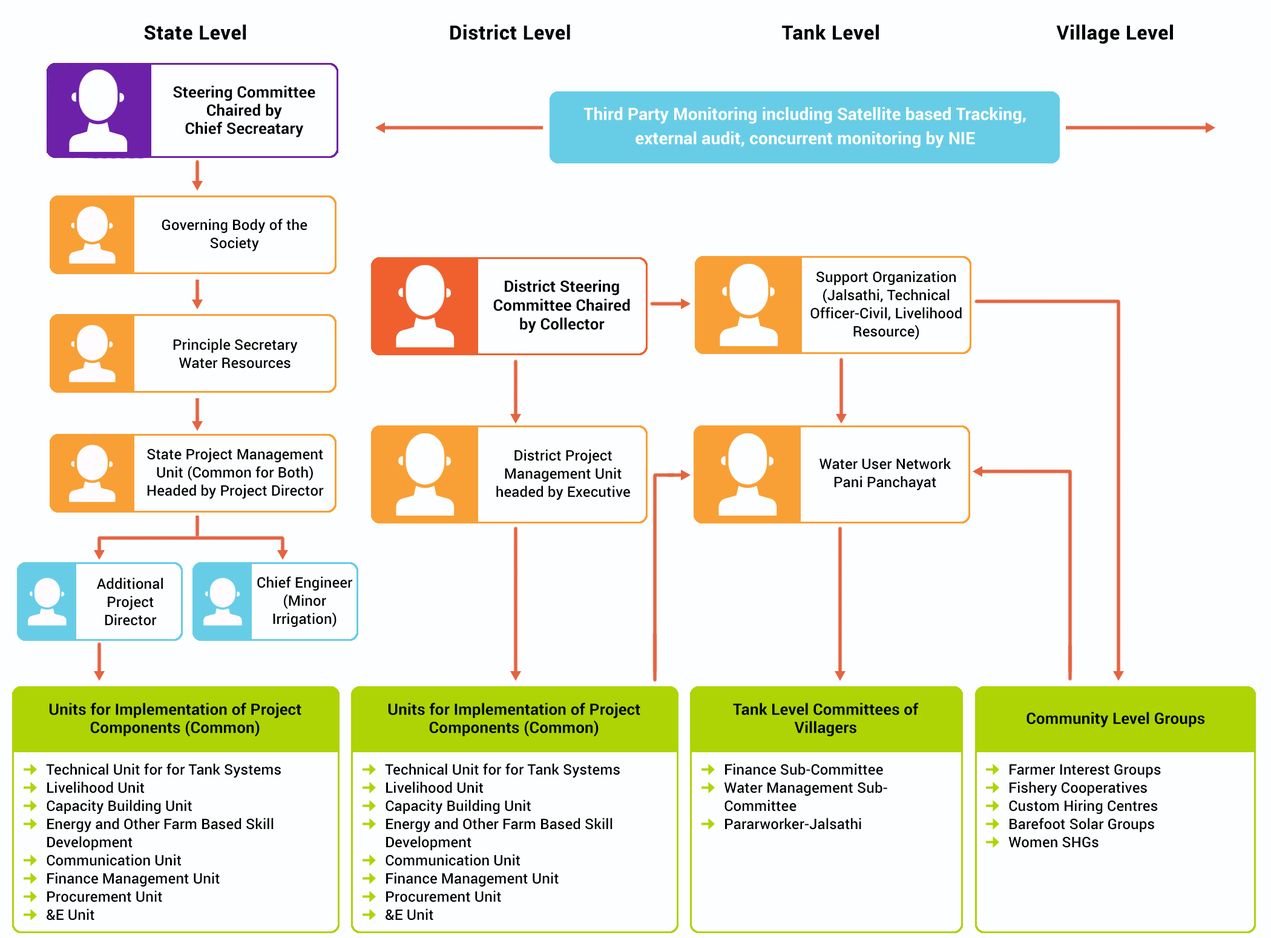
<style>
.page{position:relative;width:1271px;height:938px;background:#fdfeff}
.page>*{position:absolute;margin:0}
.t1{font:19.4px "Roboto-Bold";letter-spacing:0.005em;color:#000000;font-weight:bold}
.t2{font:15.7px/18.2px "Roboto-Bold";letter-spacing:0.005em;color:#000000}
.t3{font:16.9px/24.2px "Roboto-Bold";letter-spacing:0.005em;color:#ffffff}
.t4{font:14.5px/18.2px "Roboto-Medium";letter-spacing:0.005em;color:#000000}
.t5{font:15.7px "Roboto-Bold";letter-spacing:0.005em;color:#000000}
</style>
<div class="page">
<p class="t1" style="left:144px;top:24px;width:102px;height:16px">State Level</p>
<p class="t1" style="left:450px;top:24px;width:120px;height:16px">District Level</p>
<p class="t1" style="left:782px;top:24px;width:97px;height:16px">Tank Level</p>
<p class="t1" style="left:1056px;top:24px;width:117px;height:20px">Village Level</p>
<p class="t2" style="left:173px;top:85px;width:142px;height:52px;text-align:center">Steering Committee<br>Chaired by<br>Chief Secreatary</p>
<p class="t3" style="left:583px;top:107px;width:443px;height:41px;text-align:center">Third Party Monitoring including Satellite based Tracking,<br>external audit, concurrent monitoring by NIE</p>
<p class="t4" style="left:162px;top:218px;width:145px;height:33px;text-align:center">Governing Body of the<br>Society</p>
<p class="t5" style="left:493px;top:280px;width:137px;height:53px;text-align:center">District Steering<br>Committee Chaired<br>by Collector</p>
<p class="t4" style="left:810px;top:271px;width:152px;height:69px;text-align:center">Support Organization<br>(Jalsathi, Technical<br>Officer-Civil, Livelihood<br>Resource)</p>
<p class="t4" style="left:173px;top:338px;width:125px;height:31px;text-align:center">Principle Secretary<br>Water Resources</p>
<p class="t4" style="left:147px;top:448px;width:177px;height:51px;text-align:center">State Project Management<br>Unit (Common for Both)<br>Headed by Project Director</p>
<p class="t4" style="left:496px;top:449px;width:134px;height:51px;text-align:center">District Project<br>Management Unit<br>headed by Executive</p>
<p class="t4" style="left:820px;top:458px;width:131px;height:32px;text-align:center">Water User Network<br>Pani Panchayat</p>
<p class="t4" style="left:97px;top:577px;width:66px;height:49px;text-align:center">Additional<br>Project<br>Director</p>
<p class="t4" style="left:257px;top:576px;width:96px;height:52px;text-align:center">Chief Engineer<br>(Minor<br>Irrigation)</p>
<p class="t2" style="left:49px;top:703px;width:252px;height:34px;text-align:center">Units for Implementation of Project<br>Components (Common)</p>
<p class="t2" style="left:388px;top:703px;width:252px;height:34px;text-align:center">Units for Implementation of Project<br>Components (Common)</p>
<p class="t2" style="left:733px;top:703px;width:186px;height:34px;text-align:center">Tank Level Committees of<br>Villagers</p>
<p class="t5" style="left:1027px;top:712px;width:178px;height:16px">Community Level Groups</p>
<p class="t4" style="left:46px;top:763px;width:235px;height:158px">Technical Unit for for Tank Systems<br>Livelihood Unit<br>Capacity Building Unit<br>Energy and Other Farm Based Skill<br>Development<br>Communication Unit<br>Finance Management Unit<br>Procurement Unit<br>&amp;E Unit</p>
<p class="t4" style="left:385px;top:763px;width:235px;height:158px">Technical Unit for for Tank Systems<br>Livelihood Unit<br>Capacity Building Unit<br>Energy and Other Farm Based Skill<br>Development<br>Communication Unit<br>Finance Management Unit<br>Procurement Unit<br>&amp;E Unit</p>
<p class="t4" style="left:724px;top:763px;width:163px;height:67px">Finance Sub-Committee<br>Water Management Sub-<br>Committee<br>Pararworker-Jalsathi</p>
<p class="t4" style="left:1008px;top:764px;width:153px;height:84px">Farmer Interest Groups<br>Fishery Cooperatives<br>Custom Hiring Centres<br>Barefoot Solar Groups<br>Women SHGs</p>
</div>
